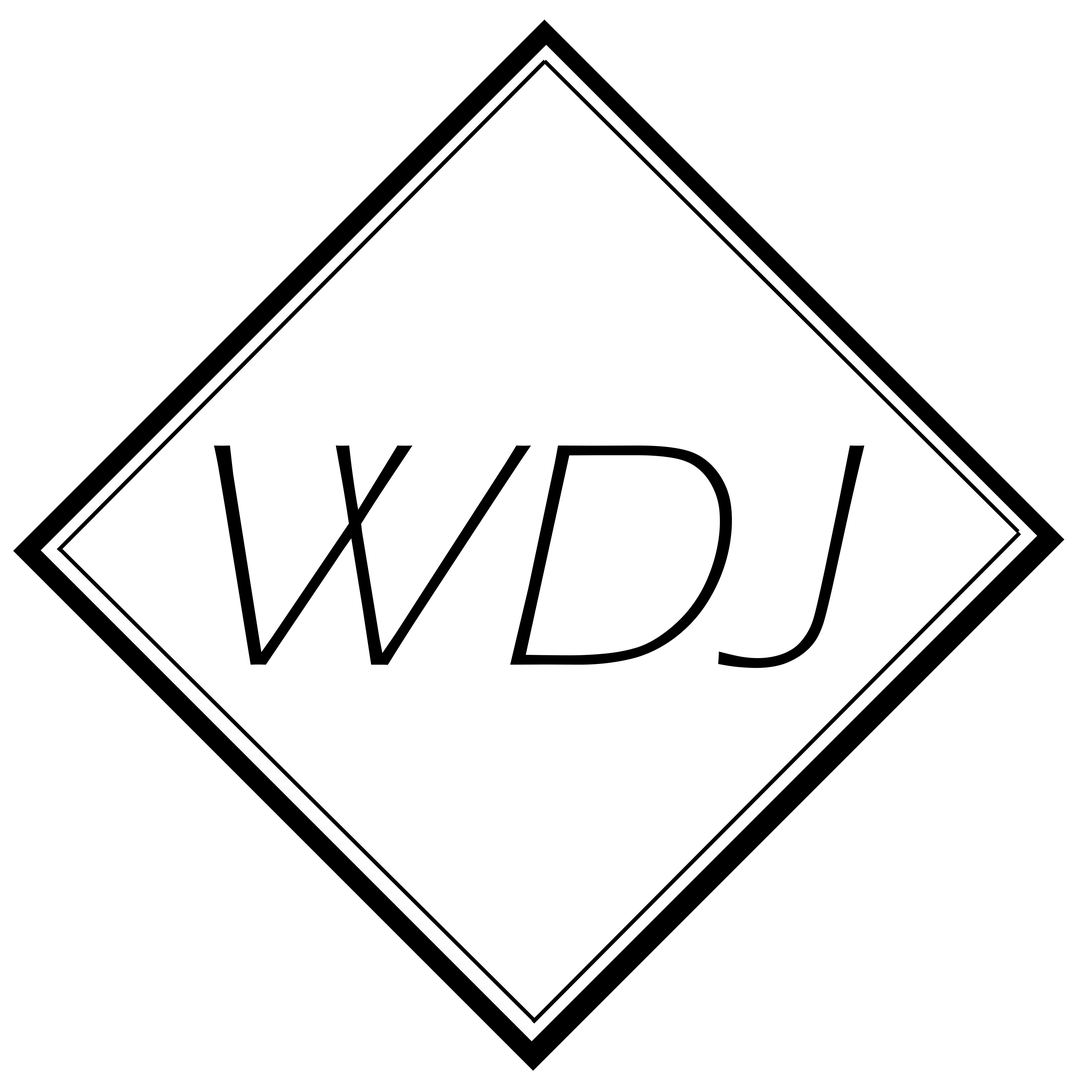
<style>
.page{position:relative;width:1092px;height:1092px;background:#ffffff}
.page>*{position:absolute;margin:0}
.t1{font:328.6px "ErasITC-Light";color:#000000;font-style:italic}
</style>
<div class="page">
<p class="t1" style="left:214px;top:446px;width:650px;height:222px">WDJ</p>
</div>
